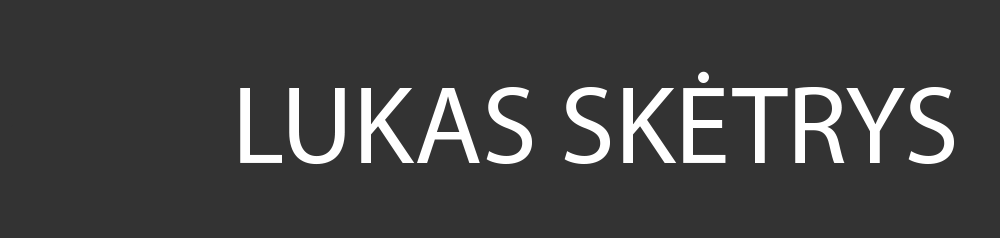
<style>
.page{position:relative;width:1000px;height:238px;background:#333333}
.page>*{position:absolute;margin:0}
.t1{font:111.2px "MyriadPro-Regular";color:#ffffff}
</style>
<div class="page">
<p class="t1" style="left:240px;top:71px;width:714px;height:94px">LUKAS SKĖTRYS</p>
</div>
